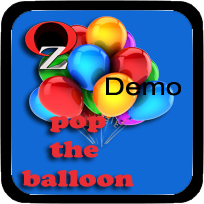
<style>
.page{position:relative;width:204px;height:204px;background:#1169d6}
.page>*{position:absolute;margin:0}
.t1{font:24.3px "ArialMT";letter-spacing:0.005em;color:#000000;scale:1.2 1}
.t2{font:24.3px "CooperBlack";letter-spacing:0.005em;color:#ea2e36;scale:1.2 1}
</style>
<div class="page">
<p class="t1" style="left:106px;top:77px;width:75px;height:19px">Demo</p>
<p class="t2" style="left:22px;top:116px;width:112px;height:71px;text-align:center">pop<br>the <br>balloon</p>
</div>
